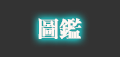
<style>
.page{position:relative;width:120px;height:57px;background:#333333}
.page>*{position:absolute;margin:0}
.t1{font:22px "RyuminPr6N-ExBold";color:#fff6f2;font-weight:bold}
</style>
<div class="page">
<p class="t1" style="left:38px;top:18px;width:44px;height:21px">圖鑑</p>
</div>
